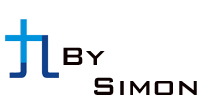
<style>
.page{position:relative;width:200px;height:100px;background:#ffffff}
.page>*{position:absolute;margin:0}
.t1{font:33.3px "BankGothicBT-Medium";color:#0d0101}
</style>
<div class="page">
<p class="t1" style="left:63px;top:47px;width:42px;height:18px">By</p>
<p class="t1" style="left:94px;top:77px;width:103px;height:18px">Simon</p>
</div>
